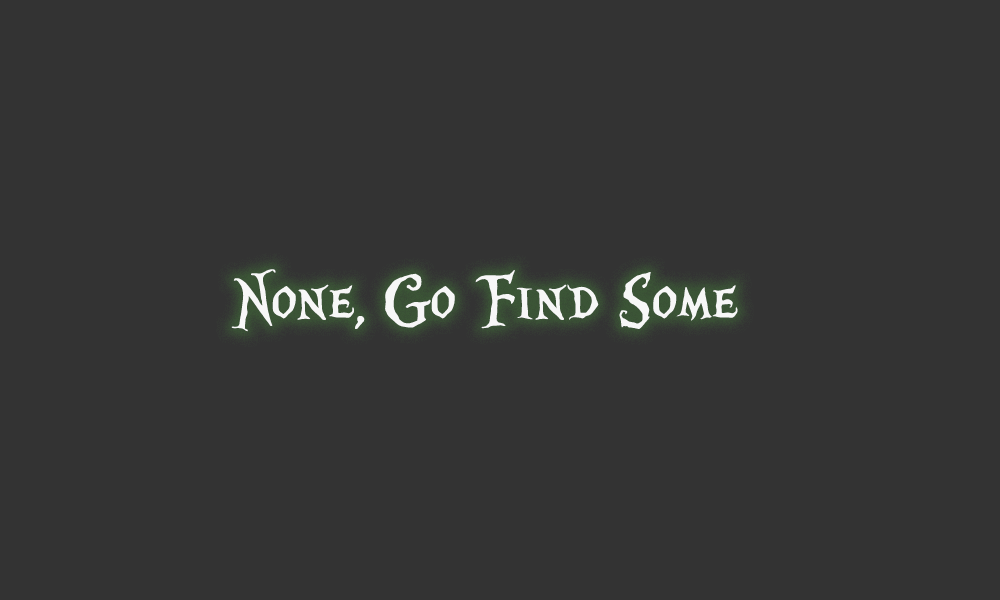
<style>
.page{position:relative;width:1000px;height:600px;background:#333333}
.page>*{position:absolute;margin:0}
.t1{font:80px "AliceinWonderland";color:#f7f7f7}
</style>
<div class="page">
<p class="t1" style="left:231px;top:269px;width:507px;height:63px">None, Go Find Some</p>
</div>
